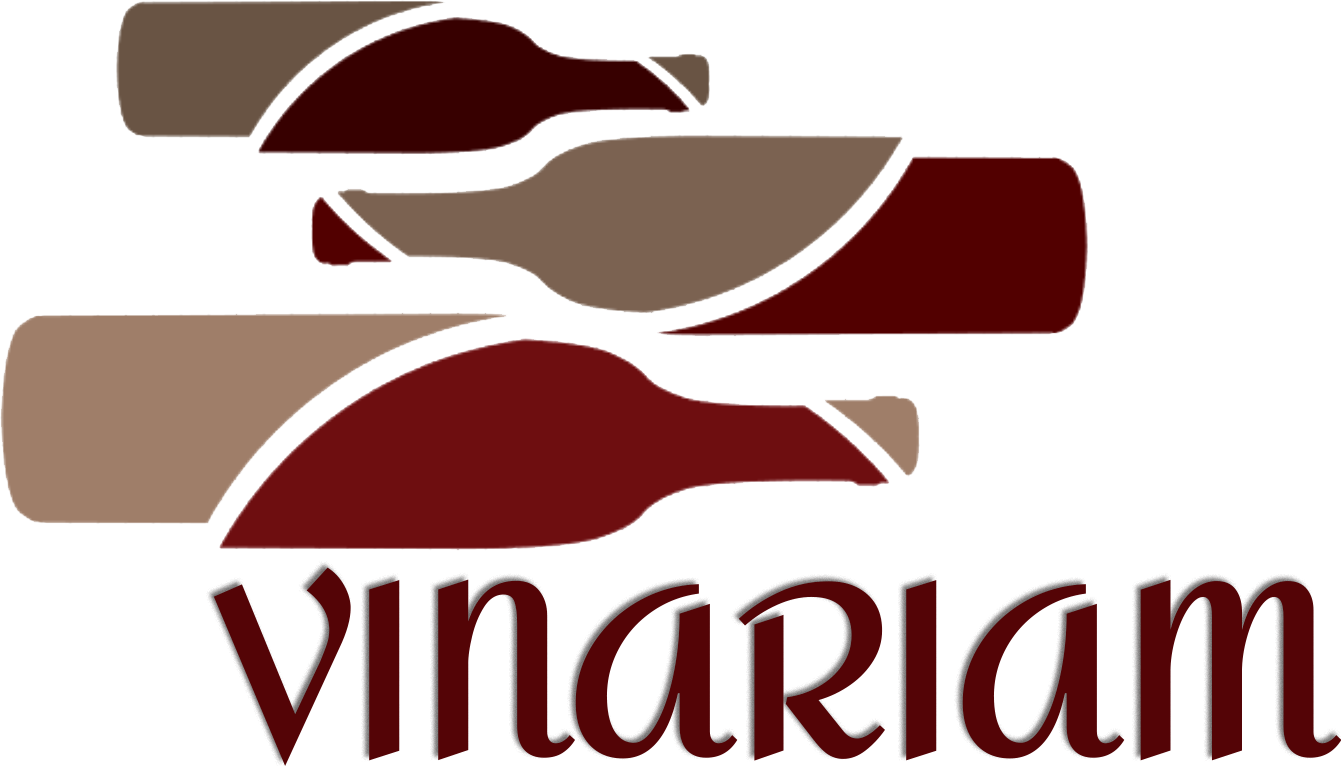
<style>
.page{position:relative;width:1341px;height:766px;background:#ffffff}
.page>*{position:absolute;margin:0}
.t1{font:240px "Amita-Bold";color:#540406}
</style>
<div class="page">
<p class="t1" style="left:213px;top:567px;width:1129px;height:199px">VINARIAM</p>
</div>
